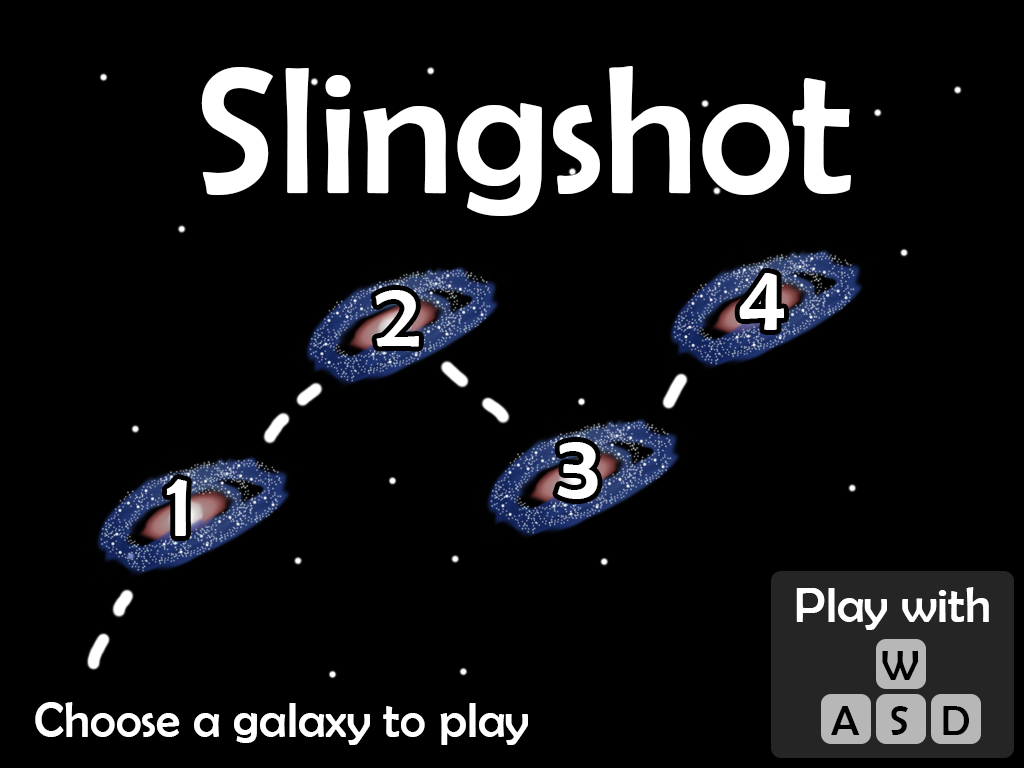
<style>
.page{position:relative;width:1024px;height:768px;background:#000000}
.page>*{position:absolute;margin:0}
.t1{font:183px "BerlinSansFB-Reg";color:#ffffff}
.t2{font:93px "BerlinSansFB-Reg";color:#ffffff}
.t3{font:50px "BerlinSansFB-Reg";color:#ffffff}
.t4{font:43px "BerlinSansFB-Reg";color:#000000}
</style>
<div class="page">
<p class="t1" style="left:201px;top:66px;width:650px;height:150px">Slingshot</p>
<p class="t2" style="left:739px;top:273px;width:45px;height:57px">4</p>
<p class="t2" style="left:375px;top:290px;width:44px;height:57px">2</p>
<p class="t2" style="left:557px;top:442px;width:41px;height:57px">3</p>
<p class="t2" style="left:166px;top:479px;width:21px;height:57px">1</p>
<p class="t3" style="left:796px;top:587px;width:193px;height:43px">Play with</p>
<p class="t4" style="left:882px;top:651px;width:37px;height:29px">W</p>
<p class="t3" style="left:35px;top:702px;width:493px;height:43px">Choose a galaxy to play</p>
<p class="t4" style="left:831px;top:706px;width:29px;height:29px">A</p>
<p class="t4" style="left:891px;top:706px;width:17px;height:29px">S</p>
<p class="t4" style="left:943px;top:706px;width:26px;height:29px">D</p>
</div>
